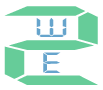
<style>
.page{position:relative;width:103px;height:90px;background:#ffffff}
.page>*{position:absolute;margin:0}
.t1{font:109.7px "DigifaceWide";color:#66cc99;scale:1.38 1}
.t2{font:26.5px "DigifaceWide";color:#66a4cc}
.t3{font:28.6px "DigifaceWide";color:#66a4cc}
</style>
<div class="page">
<p class="t1" style="left:4px;top:6px;width:94px;height:79px">2</p>
<p class="t2" style="left:36px;top:18px;width:31px;height:19px">W</p>
<p class="t3" style="left:43px;top:52px;width:18px;height:21px">E</p>
</div>
